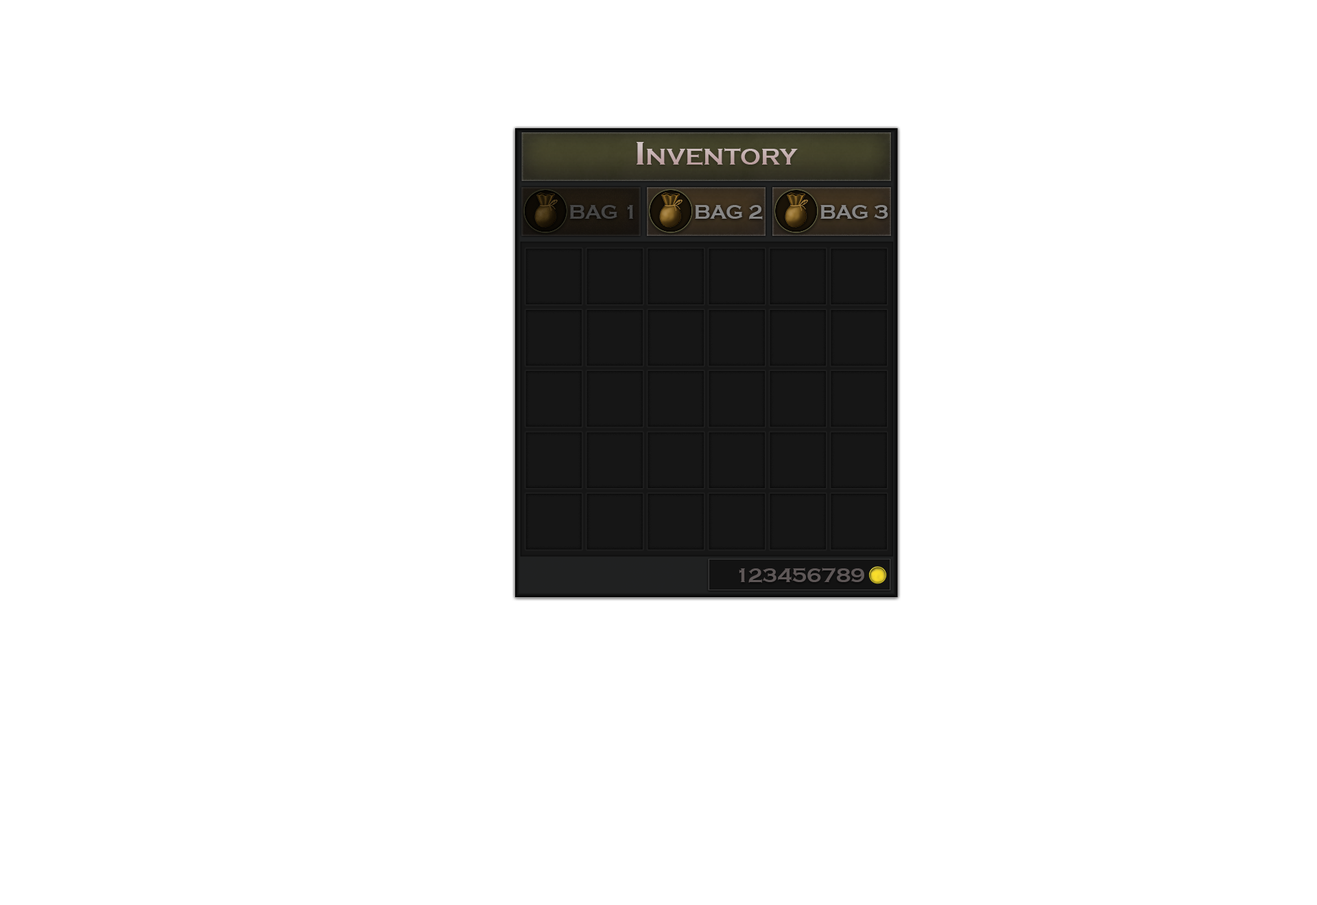
<style>
.page{position:relative;width:1317px;height:905px;background:#ffffff}
.page>*{position:absolute;margin:0}
.t1{font:34.3px "CopperplateGothic-Bold";color:#c3acac;font-variant:small-caps}
.t2{font:20.6px "CopperplateGothic-Bold";color:#434342;font-variant:small-caps}
.t3{font:20.6px "CopperplateGothic-Bold";color:#878685;font-variant:small-caps}
.t4{font:20.6px "CopperplateGothic-Bold";color:#5e5757;font-variant:small-caps}
</style>
<div class="page">
<p class="t1" style="left:637px;top:142px;width:161px;height:23px">Inventory</p>
<p class="t2" style="left:569px;top:205px;width:64px;height:14px">BAG 1</p>
<p class="t3" style="left:695px;top:205px;width:68px;height:14px">BAG 2</p>
<p class="t3" style="left:820px;top:205px;width:68px;height:14px">BAG 3</p>
<p class="t4" style="left:739px;top:568px;width:125px;height:15px">123456789</p>
</div>
